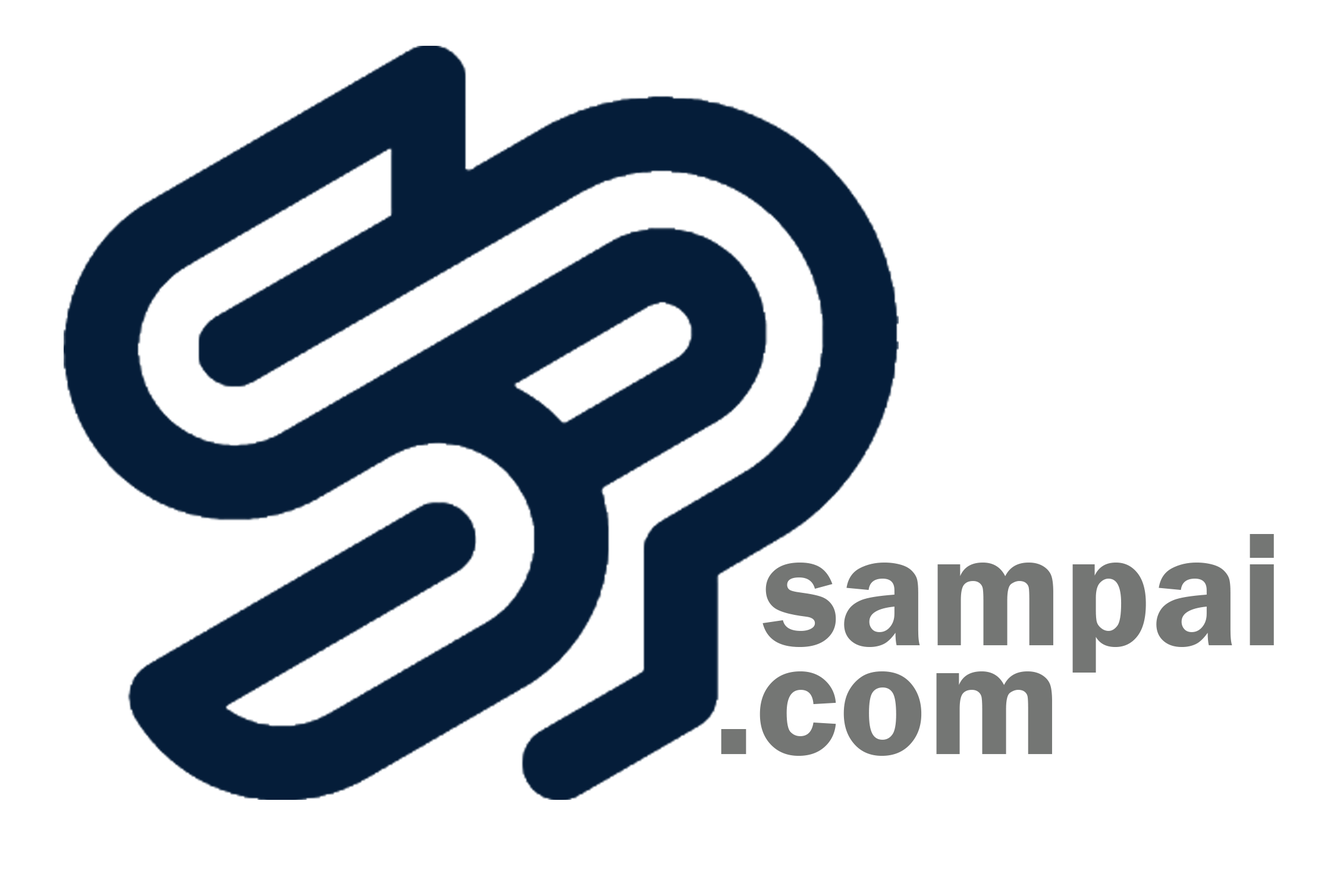
<style>
.page{position:relative;width:1337px;height:892px;background:#ffffff}
.page>*{position:absolute;margin:0}
.t1{font:163.8px "FranklinGothic-Demi";color:#747674}
</style>
<div class="page">
<p class="t1" style="left:762px;top:534px;width:512px;height:139px">sampai</p>
<p class="t1" style="left:721px;top:671px;width:331px;height:85px">.com</p>
</div>
